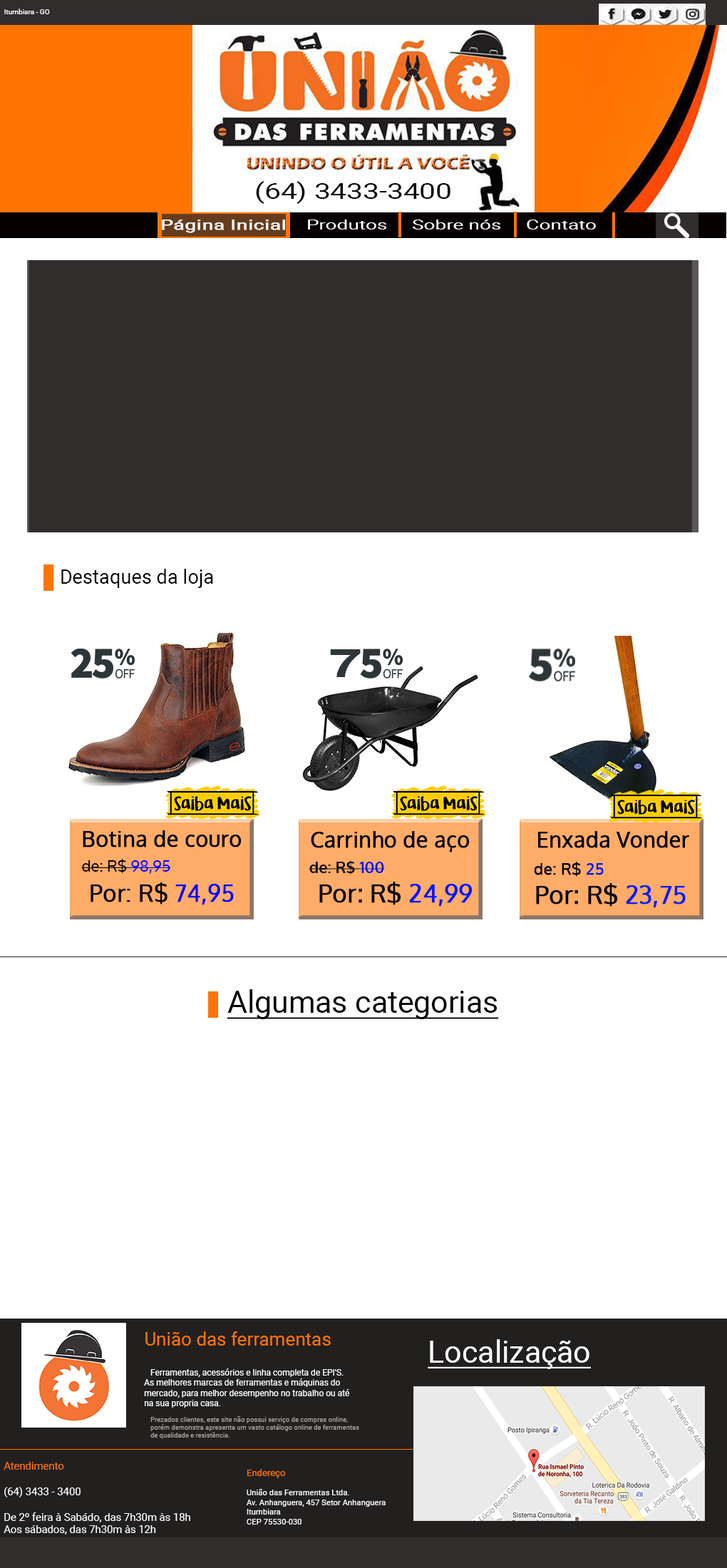
<style>
.page{position:relative;width:727px;height:1568px;background:#ffffff}
.page>*{position:absolute;margin:0}
.t1{font:7.1px "Roboto-Regular";color:#ffffff}
.t2{font:22.1px "Roboto-Regular";color:#030303;scale:1.31 1}
.t3{font:13.5px "Roboto-Regular";color:#ffffff;scale:1.48 1}
.t4{font:13.5px "Roboto-Regular";color:#ffffff;font-weight:bold;scale:1.48 1}
.t5{font:19.6px "Roboto-Regular";color:#000000}
.t6{font:39px "Arial-BoldMT";color:#2f3639;scale:1.62 1}
.t7{font:21.4px "Oxygen-Regular";color:#000000;font-weight:bold}
.t8{font:15.7px "Oxygen-Bold";color:#000000}
.t9{font:15.7px "Oxygen-Bold";color:#0316f3}
.t10{font:24.2px "Oxygen-Regular";color:#000000;font-weight:bold}
.t11{font:24.2px "Oxygen-Regular";color:#0719f4;font-weight:bold}
.t12{font:15.7px "Oxygen-Regular";color:#000000;font-weight:bold}
.t13{font:15.7px "Oxygen-Regular";color:#000000}
.t14{font:15.7px "Oxygen-Regular";color:#0303ff}
.t15{font:15.7px "Oxygen-Regular";color:#091bec;font-weight:bold}
.t16{font:22.8px "Oxygen-Regular";color:#000000;font-weight:bold}
.t17{font:22.8px "Oxygen-Regular";color:#0505ff;font-weight:bold}
.t18{font:24.2px "Oxygen-Regular";color:#0c1ef0;font-weight:bold}
.t19{font:30.5px "Roboto-Regular";color:#000000;text-decoration:underline}
.t20{font:18.5px "Roboto-Regular";color:#ff7403}
.t21{font:30.5px "Roboto-Regular";color:#ffffff;text-decoration:underline}
.t22{font:8.6px "Roboto-Regular";color:#ffffff}
.t23{font:10.5px "Roboto-Regular";color:#ffffff}
.t24{font:10.5px "Roboto-Regular";color:#ff7403}
.t25{font:8px "Roboto-Regular";color:#ffffff}
.t26{font:9.3px "Roboto-Regular";color:#ff7403}
</style>
<div class="page">
<p class="t1" style="left:4px;top:9px;width:46px;height:5px">Itumbiara - GO</p>
<p class="t2" style="left:256px;top:181px;width:194px;height:23px">(64) 3433-3400</p>
<p class="t3" style="left:162px;top:220px;width:434px;height:13px"><span class="t4">Página Inicial</span>    Produtos     Sobre nós     Contato</p>
<p class="t5" style="left:61px;top:569px;width:152px;height:19px">Destaques da loja</p>
<p class="t6" style="left:330px;top:649px;width:31px;height:28px">7</p>
<p class="t7" style="left:83px;top:830px;width:159px;height:17px">Botina de couro</p>
<p class="t7" style="left:309px;top:831px;width:164px;height:76px;text-align:center">Carrinho de aço<br>  <span class="t8">de: R$ </span><span class="t9">100<br>  </span><span class="t10">Por: R$ </span><span class="t11">24,99</span></p>
<p class="t7" style="left:538px;top:831px;width:151px;height:17px"><span class="t12">    </span>Enxada Vonder</p>
<p class="t13" style="left:81px;top:859px;width:90px;height:15px">de: R$<span class="t14"> 98,95</span></p>
<p class="t12" style="left:534px;top:862px;width:70px;height:15px">de: R$ <span class="t15">25</span></p>
<p class="t16" style="left:91px;top:882px;width:143px;height:23px">Por: R$<span class="t17"> 74,95</span></p>
<p class="t10" style="left:536px;top:883px;width:150px;height:25px">Por: R$ <span class="t18">23,75</span></p>
<p class="t19" style="left:227px;top:989px;width:272px;height:30px">Algumas categorias</p>
<p class="t20" style="left:145px;top:1331px;width:186px;height:15px">União das ferramentas</p>
<p class="t21" style="left:428px;top:1339px;width:163px;height:30px">Localização</p>
<p class="t22" style="left:144px;top:1368px;width:206px;height:40px">Ferramentas, acessórios e linha completa de EPI'S. <br>As melhores marcas de ferramentas e máquinas do <br>mercado, para melhor desempenho no trabalho ou até <br>na sua propria casa.</p>
<p class="t23" style="left:4px;top:1462px;width:186px;height:73px"><span class="t24">Atendimento<br></span><br>(64) 3433 - 3400<br><br>De 2º feira à Sabádo, das 7h30m às 18h<br>Aos sábados, das 7h30m às 12h</p>
<p class="t25" style="left:247px;top:1469px;width:139px;height:56px"><span class="t26">Endereço<br></span><br>União das Ferramentas Ltda.<br>Av. Anhanguera, 457 Setor Anhanguera<br>Itumbiara<br>CEP 75530-030</p>
</div>
